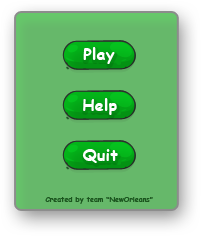
<style>
.page{position:relative;width:201px;height:236px;background:#66b86a}
.page>*{position:absolute;margin:0}
.t1{font:16px "ComicSansMS-Bold";letter-spacing:0.01em;color:#ffffff}
.t2{font:6.9px "ComicSansMS-Bold";letter-spacing:0.01em;color:#1c561f}
</style>
<div class="page">
<p class="t1" style="left:83px;top:47px;width:32px;height:17px">Play</p>
<p class="t1" style="left:83px;top:98px;width:34px;height:17px">Help</p>
<p class="t1" style="left:82px;top:149px;width:36px;height:14px">Quit</p>
<p class="t2" style="left:45px;top:197px;width:108px;height:7px">Created by team “NewOrleans”</p>
</div>
